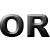
<style>
.page{position:relative;width:50px;height:50px;background:#ffffff}
.page>*{position:absolute;margin:0}
.t1{font:32px "Arial-Black"}
</style>
<div class="page">
<p class="t1" style="left:0px;top:14px;width:50px;height:23px">OR</p>
</div>
